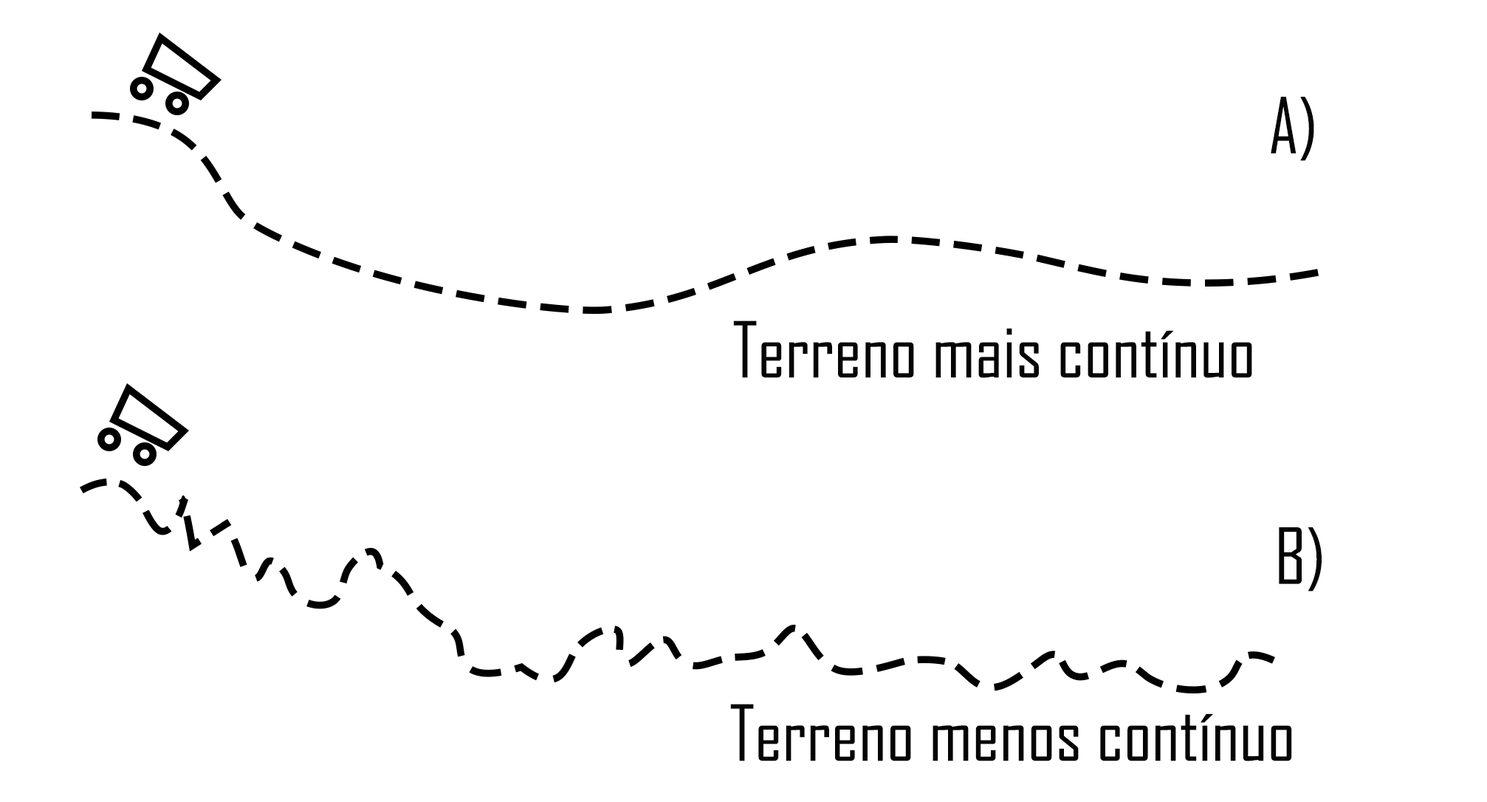
<style>
.page{position:relative;width:1487px;height:802px;background:#ffffff}
.page>*{position:absolute;margin:0}
.t1{font:73.8px "AgencyFB-Reg";color:#040404}
</style>
<div class="page">
<p class="t1" style="left:1271px;top:97px;width:43px;height:64px">A)</p>
<p class="t1" style="left:733px;top:320px;width:519px;height:58px">Terreno mais contínuo</p>
<p class="t1" style="left:1279px;top:527px;width:43px;height:64px">B)</p>
<p class="t1" style="left:730px;top:704px;width:562px;height:57px">Terreno menos contínuo</p>
</div>
